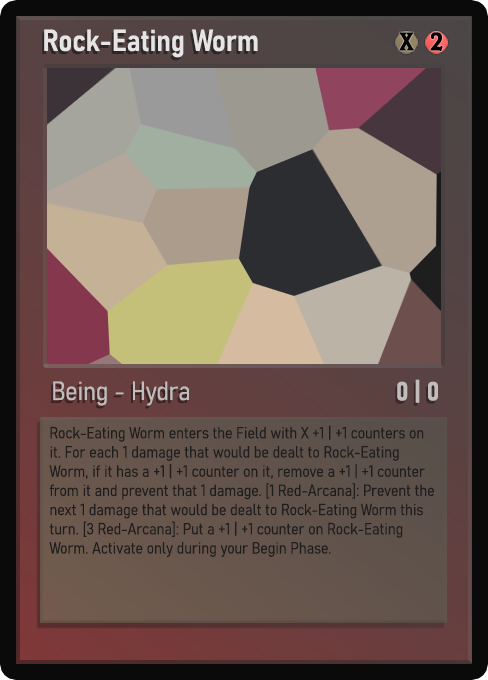
<style>
.page{position:relative;width:488px;height:680px}
.page>*{position:absolute;margin:0}
.t1{font:30px "Bahnschrift-SemiBoldSemiCondensed";color:#f2f2f2;font-weight:bold}
.t2{font:25px "WTRRoycroft";color:#000000;font-weight:bold;scale:1.09 1}
.t3{font:26px "Bahnschrift-LightSemiCondensed";color:#c8c8c8;font-weight:bold}
.t4{font:26px "Bahnschrift-BoldSemiCondensed";color:#c1bdbd;font-weight:bold}
.t5{font:16px "Bahnschrift-LightSemiCondensed";color:#1e1e1e;font-weight:bold}
</style>
<div class="page">
<p class="t1" style="left:44px;top:29px;width:214px;height:29px;opacity:0.9">Rock-Eating Worm</p>
<p class="t2" style="left:399px;top:32px;width:15px;height:19px">X</p>
<p class="t2" style="left:430px;top:32px;width:13px;height:19px">2</p>
<p class="t3" style="left:53px;top:381px;width:136px;height:25px;opacity:0.9">Being - Hydra</p>
<p class="t4" style="left:397px;top:379px;width:41px;height:24px">0 | 0</p>
<p class="t5" style="left:49px;top:425px;width:385px;height:132px">Rock-Eating Worm enters the Field with X +1 | +1 counters on it. For each 1 damage that would be dealt to Rock-Eating Worm, if it has a +1 | +1 counter on it, remove a +1 | +1 counter from it and prevent that 1 damage. [1 Red-Arcana]: Prevent the next 1 damage that would be dealt to Rock-Eating Worm this turn. [3 Red-Arcana]: Put a +1 | +1 counter on Rock-Eating Worm. Activate only during your Begin Phase.</p>
</div>
